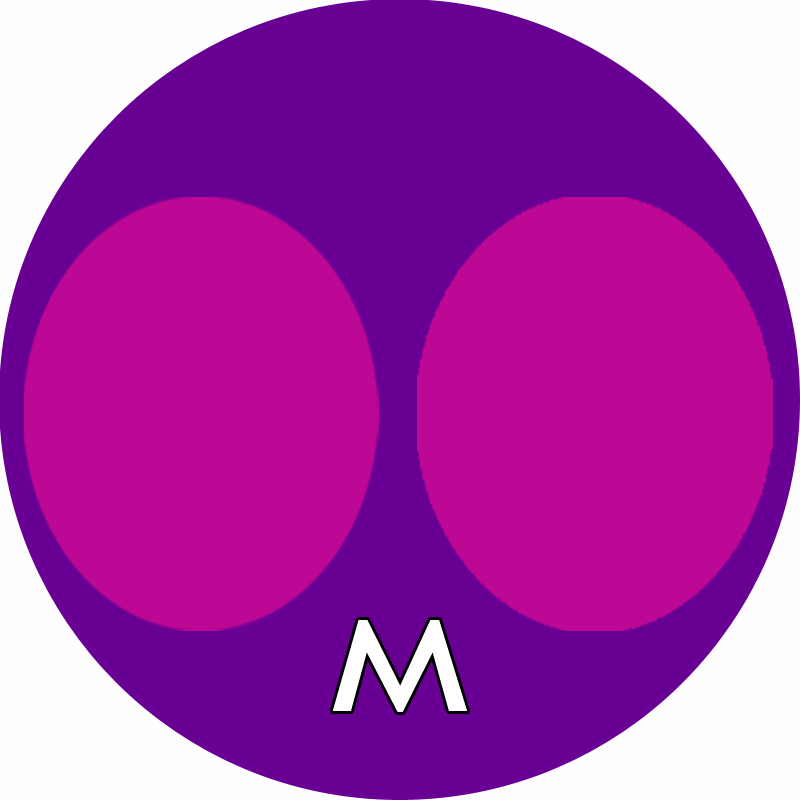
<style>
.page{position:relative;width:800px;height:800px;background:#680094}
.page>*{position:absolute;margin:0}
.t1{font:127.3px "TrebuchetMS";color:#ffffff;scale:1.51 1}
</style>
<div class="page">
<p class="t1" style="left:332px;top:620px;width:135px;height:92px">M</p>
</div>
